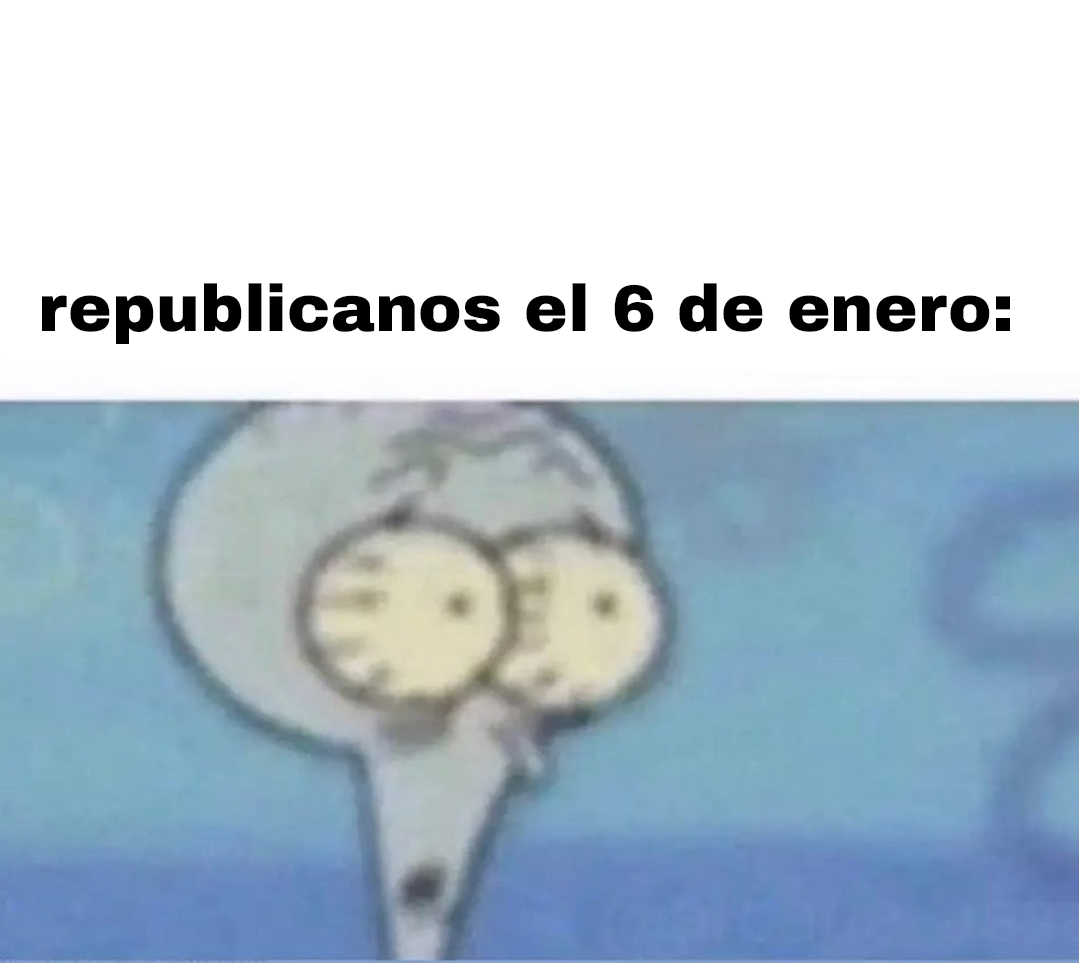
<style>
.page{position:relative;width:1079px;height:963px;background:#ffffff}
.page>*{position:absolute;margin:0}
.t1{font:65.6px "ArchivoBlack-Regular";color:#000000}
</style>
<div class="page">
<p class="t1" style="left:42px;top:283px;width:968px;height:61px">republicanos el 6 de enero:</p>
</div>
